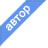
<style>
.page{position:relative;width:48px;height:48px;background:#ffffff}
.page>*{position:absolute;margin:0}
.t1{font:11.2px "ArialMT";color:#fafbfd;font-weight:bold}
</style>
<div class="page">
<p class="t1" style="left:6px;top:5px;width:24px;height:26px;rotate:-45deg">автор</p>
</div>
